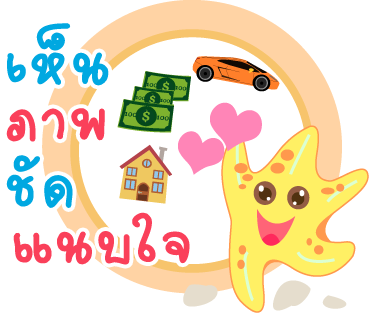
<style>
.page{position:relative;width:370px;height:320px;background:#ffffff}
.page>*{position:absolute;margin:0}
.t1{font:89px "2005_iannnnnMTV";letter-spacing:0.025em;color:#00a8e1;scale:1.06 1}
.t2{font:89px "2005_iannnnnMTV";letter-spacing:0.025em;color:#fa405a;scale:1.06 1}
</style>
<div class="page">
<p class="t1" style="left:7px;top:23px;width:102px;height:63px">เห็น</p>
<p class="t2" style="left:6px;top:108px;width:99px;height:34px">ภาพ</p>
<p class="t1" style="left:6px;top:155px;width:67px;height:53px">ชัด</p>
<p class="t2" style="left:13px;top:212px;width:177px;height:53px">แนบใจ</p>
</div>
